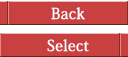
<style>
.page{position:relative;width:128px;height:57px;background:#c84040}
.page>*{position:absolute;margin:0}
.t1{font:15px/32px "KozMinPro-Medium";letter-spacing:0.025em;color:#ffffff}
</style>
<div class="page">
<p class="t1" style="left:47px;top:7px;width:42px;height:45px;text-align:center">Back<br>Select</p>
</div>
